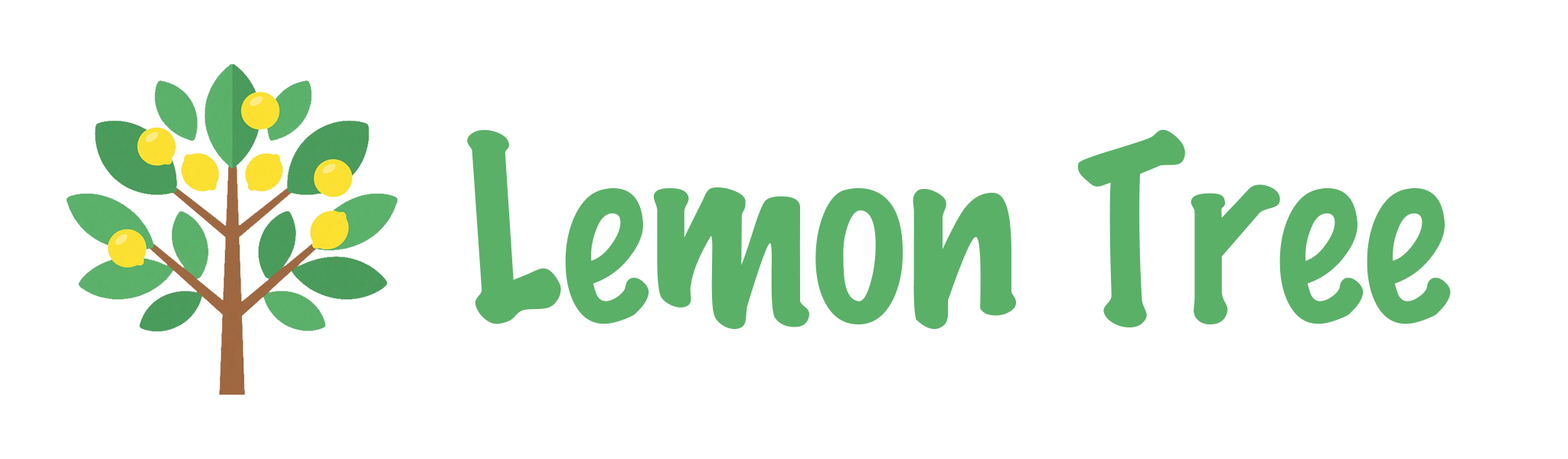
<style>
.page{position:relative;width:1568px;height:459px;background:#ffffff}
.page>*{position:absolute;margin:0}
.t1{font:229.7px "MarkerFelt-Thin";color:#59b067}
</style>
<div class="page">
<p class="t1" style="left:467px;top:129px;width:984px;height:200px">Lemon Tree</p>
</div>
